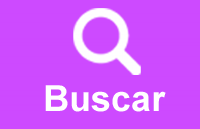
<style>
.page{position:relative;width:200px;height:129px;background:#cd4aff}
.page>*{position:absolute;margin:0}
.t1{font:36px "Arial-BoldMT";color:#ffffff}
</style>
<div class="page">
<p class="t1" style="left:45px;top:85px;width:121px;height:27px">Buscar</p>
</div>
